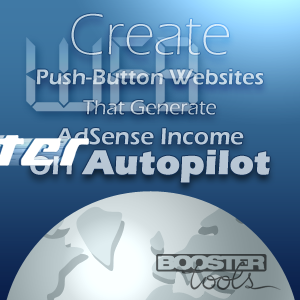
<style>
.page{position:relative;width:300px;height:300px}
.page>*{position:absolute;margin:0}
.t1{font:22px/30px "ErasITC-Demi";color:#b8c7d6}
.t2{font:60px/30px "ErasITC-Light";color:#b8c7d6}
.t3{font:21px/30px "ErasITC-Medium";color:#b8c7d6}
.t4{font:24px/30px "ErasITC-Demi";color:#b8c7d6}
.t5{font:36px/30px "ErasITC-Demi";color:#b8c7d6}
.t6{font:36px/30px "ErasITC-Ultra";color:#b8c7d6}
.t7{font:102.3px "Digiface"}
</style>
<div class="page">
<p class="t1" style="left:30px;top:13px;width:240px;height:170px;text-align:center"><span class="t2">Create<br></span>Push-Button Websites<br><span class="t3">That Generate<br></span><span class="t4">AdSense Income<br></span><span class="t5">on </span><span class="t6">Autopilot</span></p>
<p class="t7" style="left:26px;top:37px;width:172px;height:75px">WEB</p>
</div>
